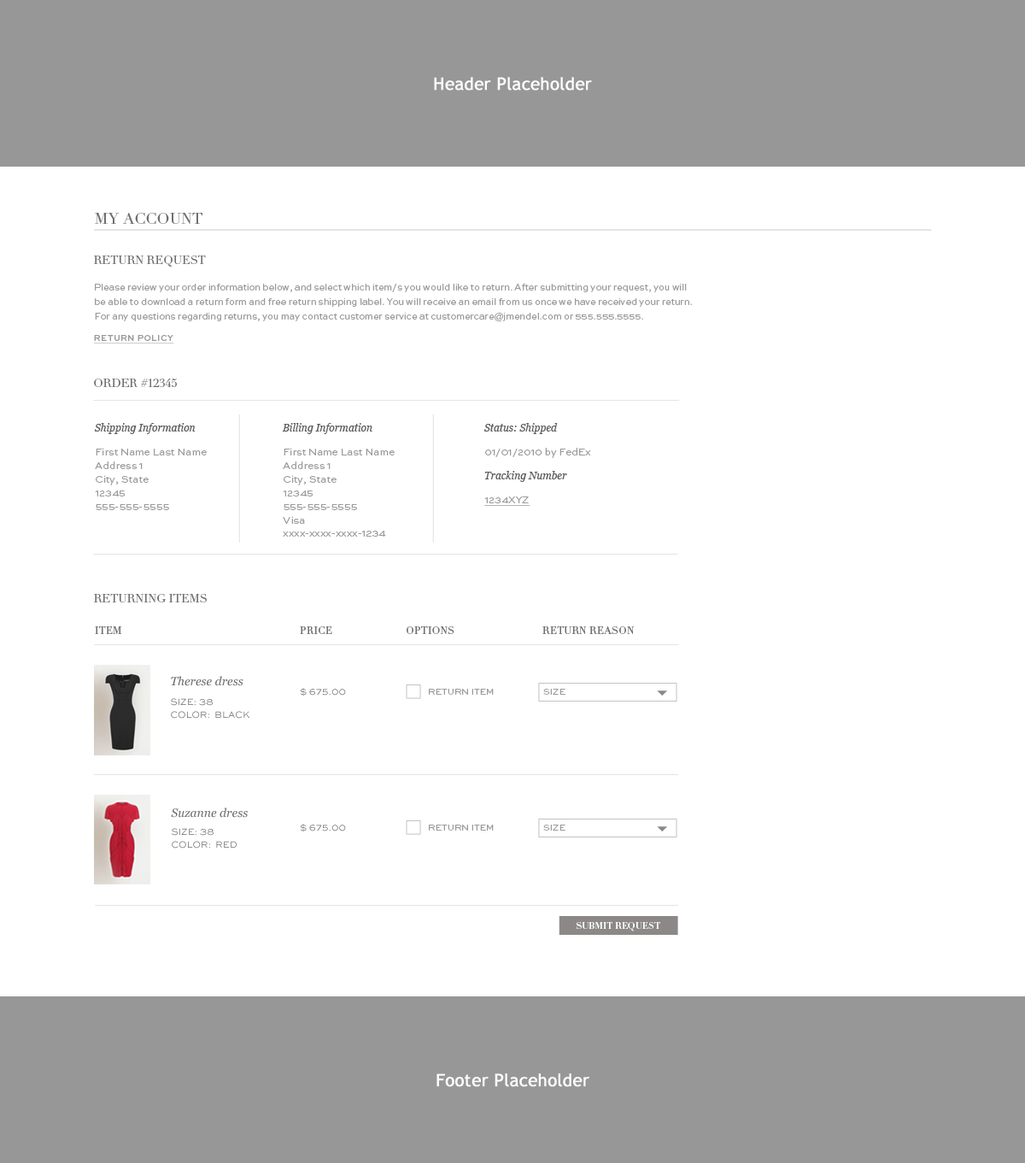
<style>
.page{position:relative;width:1025px;height:1163px;background:#ffffff}
.page>*{position:absolute;margin:0}
.t1{font:17.1px "TrebuchetMS";color:#ffffff;font-weight:bold}
.t2{font:15.4px "DidotLH-Roman";color:#6e6e6e;text-transform:uppercase}
.t3{font:12px "DidotLH-Roman";letter-spacing:-0.02em;color:#6e6e6e;text-transform:uppercase}
.t4{font:9.4px/14.5px "SweetSans-Light";color:#9d9999}
.t5{font:10.3px/11.1px "Georgia-Italic";color:#5f5f5f}
.t6{font:9.4px/11.1px "SweetSans-Medium";color:#9d9999}
.t7{font:8.5px "SweetSans-Medium";letter-spacing:0.04em;color:#9d9999;text-decoration:underline}
.t8{font:10.3px "Georgia-Italic";color:#5f5f5f}
.t9{font:9.4px "SweetSans-Medium";color:#9d9999}
.t10{font:10.3px/13.7px "SweetSans-Light";color:#9d9999}
.t11{font:10.3px/12.8px "SweetSans-Light";color:#9d9999}
.t12{font:10.3px/12.8px "SweetSans-Light";color:#9d9999;text-decoration:underline}
.t13{font:10.3px "DidotLH-Roman";color:#6e6e6e;text-transform:uppercase}
.t14{font:12px/12px "Georgia-Italic";color:#6e6e6e}
.t15{font:9.4px/19.7px "SweetSans-Light";color:#6e6e6e;text-transform:uppercase}
.t16{font:9.4px/12.8px "SweetSans-Light";color:#6e6e6e;text-transform:uppercase}
.t17{font:10.3px "SweetSans-Light"}
.t18{font:9px "SweetSans-Light";color:#9d9999;text-transform:uppercase}
.t19{font:9.4px/17.9px "SweetSans-Light";color:#6e6e6e;text-transform:uppercase}
.t20{font:8.5px "DidotLH-Bold";letter-spacing:0.02em;color:#ffffff;text-transform:uppercase}
</style>
<div class="page">
<p class="t1" style="left:434px;top:77px;width:158px;height:14px">Header Placeholder</p>
<p class="t2" style="left:95px;top:213px;width:108px;height:11px">MY ACCOUNT</p>
<p class="t3" style="left:94px;top:255px;width:112px;height:12px">RETURN REQUEST</p>
<p class="t4" style="left:95px;top:284px;width:597px;height:37px"><span class="t5"><br></span><span class="t6"><br></span>Please review your order information below, and select which item/s you would like to return. After submitting your request, you will be able to download a return form and free return shipping label. You will receive an email from us once we have received your return. For any questions regarding returns, you may contact customer service at customercare@jmendel.com or 555.555.5555.</p>
<p class="t7" style="left:93px;top:335px;width:81px;height:8px"><span class="t8"><br></span><span class="t9"><br></span>RETURN POLICY</p>
<p class="t3" style="left:94px;top:379px;width:83px;height:8px">ORDER #12345</p>
<p class="t10" style="left:94px;top:423px;width:113px;height:87px"><span class="t5">Shipping Information<br></span><span class="t6"><br></span><span class="t11">First Name Last Name<br></span>Address 1<br>City, State<br>12345<br>555-555-5555</p>
<p class="t10" style="left:282px;top:423px;width:113px;height:114px"><span class="t5">Billing Information<br></span><span class="t6"><br></span><span class="t11">First Name Last Name<br></span>Address 1<br>City, State<br>12345<br>555-555-5555<br>Visa<br><span class="t11">xxxx-xxxx-xxxx-1234</span></p>
<p class="t11" style="left:484px;top:423px;width:107px;height:83px"><span class="t5">Status: Shipped<br></span><span class="t6"><br></span>01/01/2010 by FedEx<br><br><span class="t5">Tracking Number<br><br></span><span class="t12">1234XYZ</span></p>
<p class="t3" style="left:94px;top:594px;width:113px;height:8px">RETURNing ITEMS</p>
<p class="t13" style="left:95px;top:626px;width:27px;height:8px">ITEM</p>
<p class="t13" style="left:300px;top:626px;width:32px;height:8px">PRICE</p>
<p class="t13" style="left:407px;top:626px;width:48px;height:8px">options</p>
<p class="t13" style="left:543px;top:626px;width:92px;height:8px">RETURN REASON</p>
<p class="t14" style="left:171px;top:676px;width:79px;height:43px">Therese dress<br><span class="t15">size: 38<br></span><span class="t16">COLOR:  BLACK</span></p>
<p class="t17" style="left:300px;top:688px;width:46px;height:8px">$ 675.00</p>
<p class="t18" style="left:429px;top:689px;width:65px;height:6px">RETURN ITEM</p>
<p class="t18" style="left:543px;top:689px;width:23px;height:6px">SIZE</p>
<p class="t14" style="left:171px;top:807px;width:77px;height:41px">Suzanne dress<br><span class="t19">size: 38<br></span><span class="t16">COLOR:  RED</span></p>
<p class="t17" style="left:300px;top:824px;width:46px;height:8px">$ 675.00</p>
<p class="t18" style="left:429px;top:825px;width:65px;height:6px">RETURN ITEM</p>
<p class="t18" style="left:543px;top:825px;width:23px;height:6px">SIZE</p>
<p class="t20" style="left:577px;top:922px;width:84px;height:9px">submit request</p>
<p class="t1" style="left:437px;top:1073px;width:153px;height:14px">Footer Placeholder</p>
</div>
